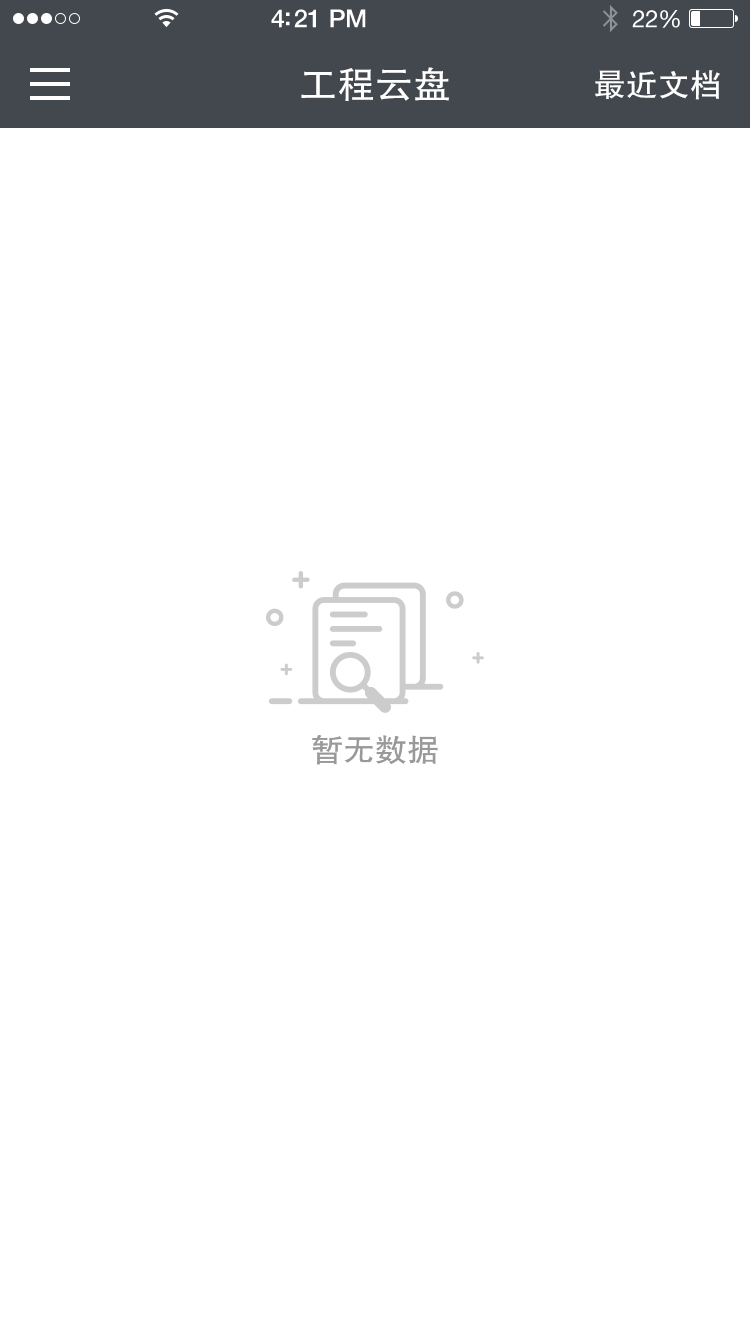
<style>
.page{position:relative;width:750px;height:1334px;background:#ffffff}
.page>*{position:absolute;margin:0}
.t1{font:38px "FZHTJW--GB1-0";color:#ffffff}
.t2{font:32px "FZHTJW--GB1-0";color:#ffffff}
.t3{font:32px "FZHTJW--GB1-0";color:#999999}
</style>
<div class="page">
<p class="t1" style="left:301px;top:67px;width:148px;height:34px">工程云盘</p>
<p class="t2" style="left:595px;top:70px;width:125px;height:30px">最近文档</p>
<p class="t3" style="left:312px;top:735px;width:126px;height:30px">暂无数据</p>
</div>
